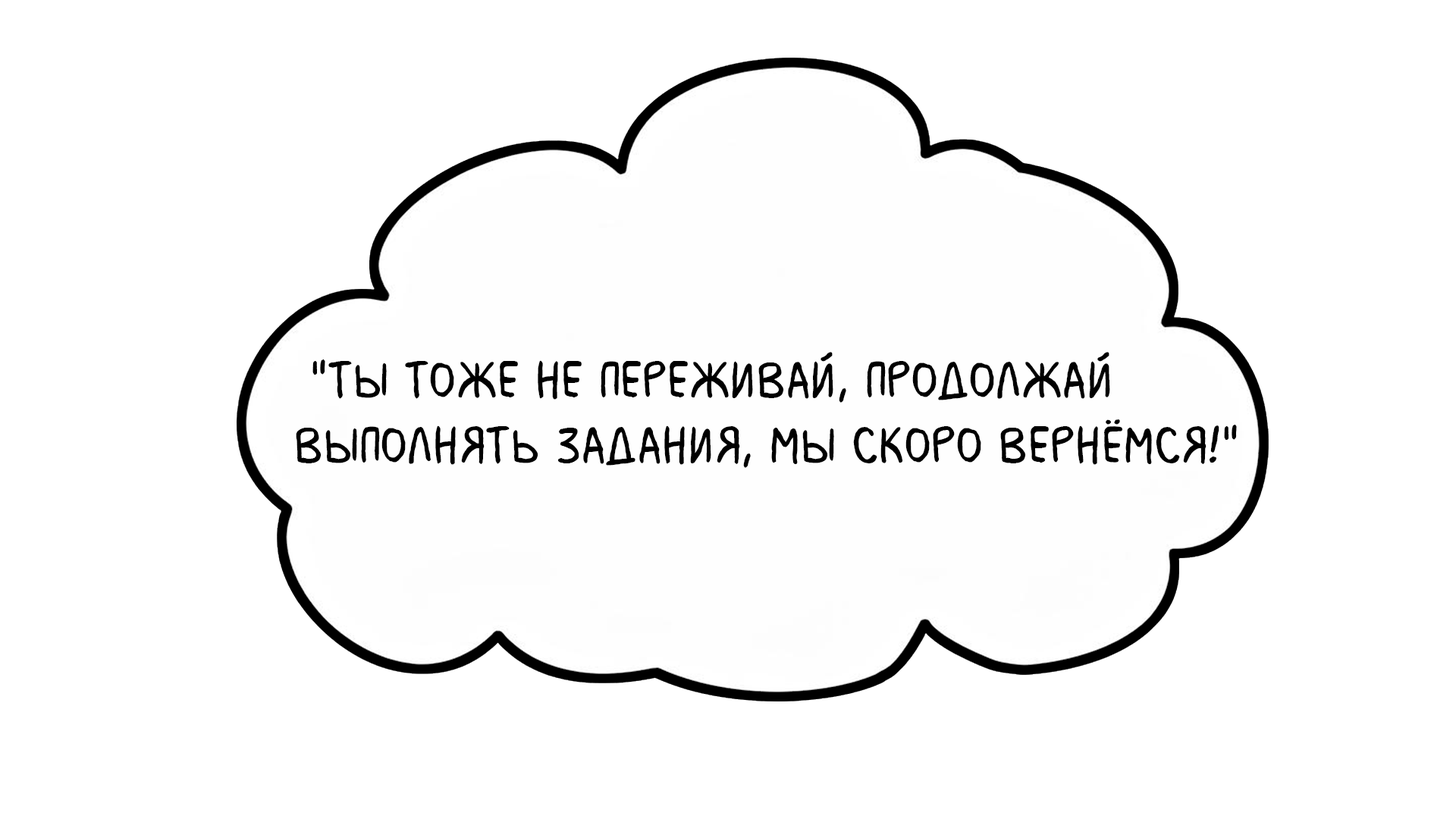
<style>
.page{position:relative;width:1456px;height:819px;background:#ffffff}
.page>*{position:absolute;margin:0}
.t1{font:54.6px "MilkMustacheBB";color:#000000}
</style>
<div class="page">
<p class="t1" style="left:296px;top:352px;width:941px;height:116px">"Ты тоже не переживай, продолжай <br>выполнять задания, мы скоро вернёмся!"</p>
</div>
